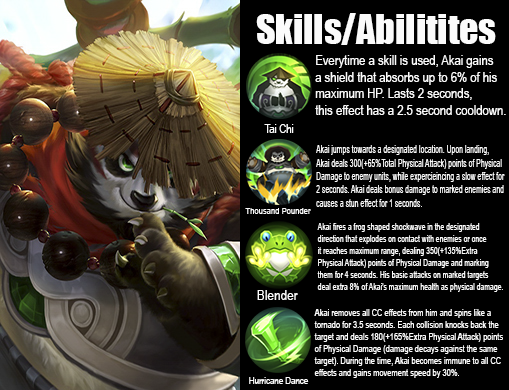
<style>
.page{position:relative;width:509px;height:390px;background:#000000}
.page>*{position:absolute;margin:0}
.t1{font:37.6px "Impact";color:#fbfbfb}
.t2{font:13.8px "ArialNarrow";color:#fbfbfb}
.t3{font:11.6px "ArialNarrow";color:#fbfbfb}
.t4{font:11.1px "ArialNarrow";color:#fbfbfb;scale:0.76 1}
.t5{font:9.3px "ArialNarrow";color:#fbfbfb}
.t6{font:10px "ArialNarrow";color:#fbfbfb;scale:0.83 1}
.t7{font:14.4px "ArialNarrow";color:#fbfbfb}
.t8{font:10px "ArialNarrow";color:#fbfbfb;scale:0.91 1}
.t9{font:9.6px "ArialNarrow";color:#fbfbfb}
</style>
<div class="page">
<p class="t1" style="left:256px;top:13px;width:240px;height:32px">Skills/Abilitites</p>
<p class="t2" style="left:315px;top:55px;width:191px;height:60px">Everytime a skill is used, Akai gains <br>a shield that absorbs up to 6% of his <br>maximum HP. Lasts 2 seconds, <br>this effect has a 2.5 second cooldown.</p>
<p class="t3" style="left:264px;top:124px;width:30px;height:9px">Tai Chi</p>
<p class="t4" style="left:316px;top:145px;width:189px;height:62px">Akai jumps towards a designated location. Upon landing, <br>Akai deals 300(+65%Total Physical Attack) points of Physical <br>Damage to enemy units, while expercieincing a slow effect for <br>2 seconds. Akai deals bonus damage to marked enemies and <br>causes a stun effect for 1 seconds.</p>
<p class="t5" style="left:245px;top:208px;width:66px;height:6px">Thousand Pounder</p>
<p class="t6" style="left:317px;top:223px;width:186px;height:69px">Akai fires a frog shaped shockwave in the designated <br>direction that explodes on contact with enemies or once <br>it reaches maximum range, dealing 350(+135%Extra <br>Physical Attack) points of Physical Damage and marking <br>them for 4 seconds. His basic attacks on marked targets <br>deal extra 8% of Akai's maximum health as physical damage.</p>
<p class="t7" style="left:257px;top:290px;width:41px;height:10px">Blender</p>
<p class="t8" style="left:314px;top:309px;width:189px;height:69px">Akai removes all CC effects from him and spins like a <br>tornado for 3.5 seconds. Each collision knocks back the <br>target and deals 180(+165%Extra Physical Attack) points <br>of Physical Damage (damage decays against the same <br>target). During the time, Akai becomes immune to all CC <br>effects and gains movement speed by 30%.</p>
<p class="t9" style="left:249px;top:377px;width:60px;height:7px">Hurricane Dance</p>
</div>
